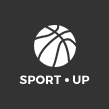
<style>
.page{position:relative;width:109px;height:109px;background:#333333}
.page>*{position:absolute;margin:0}
.t1{font:12px "Montserrat-Bold";color:#ffffff;text-transform:uppercase}
</style>
<div class="page">
<p class="t1" style="left:19px;top:75px;width:71px;height:9px">sport    up</p>
</div>
